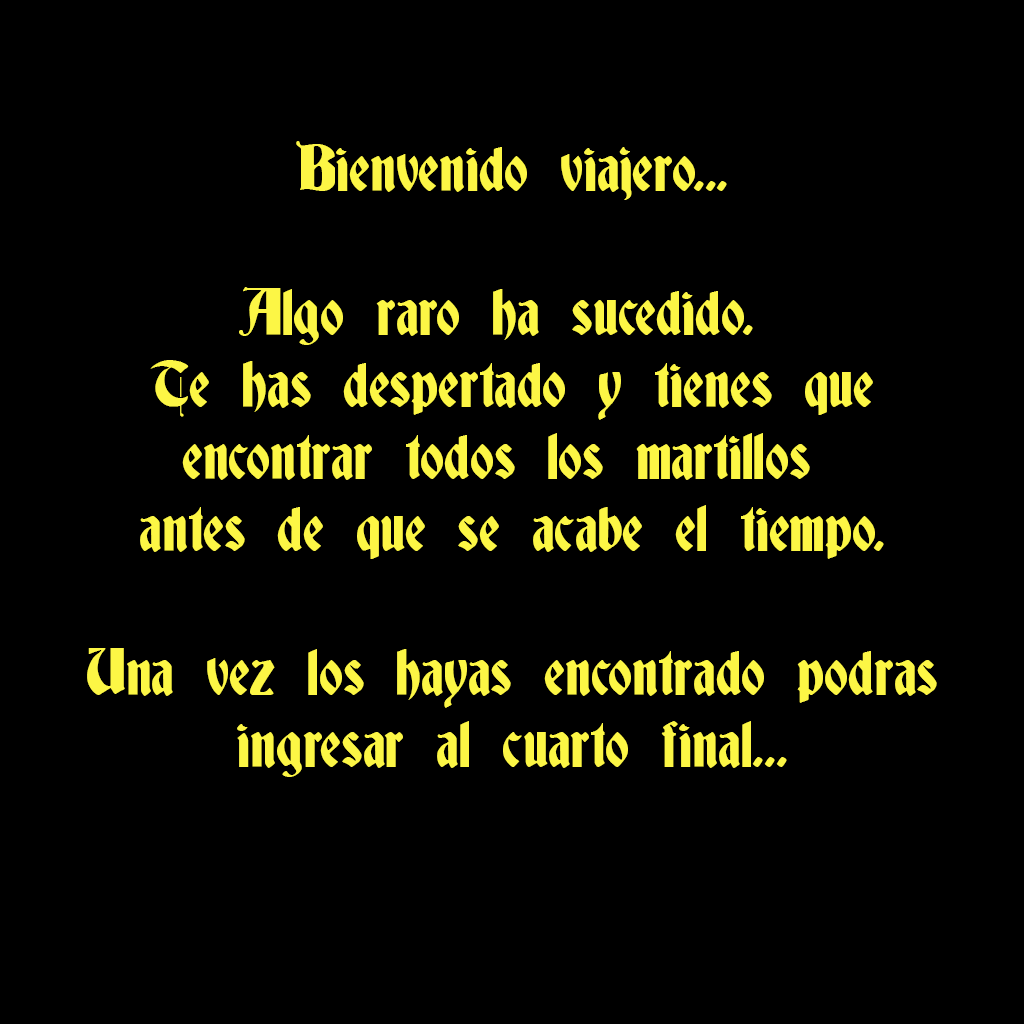
<style>
.page{position:relative;width:1024px;height:1024px;background:#000000}
.page>*{position:absolute;margin:0}
.t1{font:60px "Deutsch-Gothic";color:#fcf645}
</style>
<div class="page">
<p class="t1" style="left:87px;top:141px;width:850px;height:636px;text-align:center">Bienvenido viajero...<br><br>Algo raro ha sucedido. <br>Te has despertado y tienes que<br>encontrar todos los martillos <br>antes de que se acabe el tiempo.<br><br>Una vez los hayas encontrado podras<br>ingresar al cuarto final...</p>
</div>
